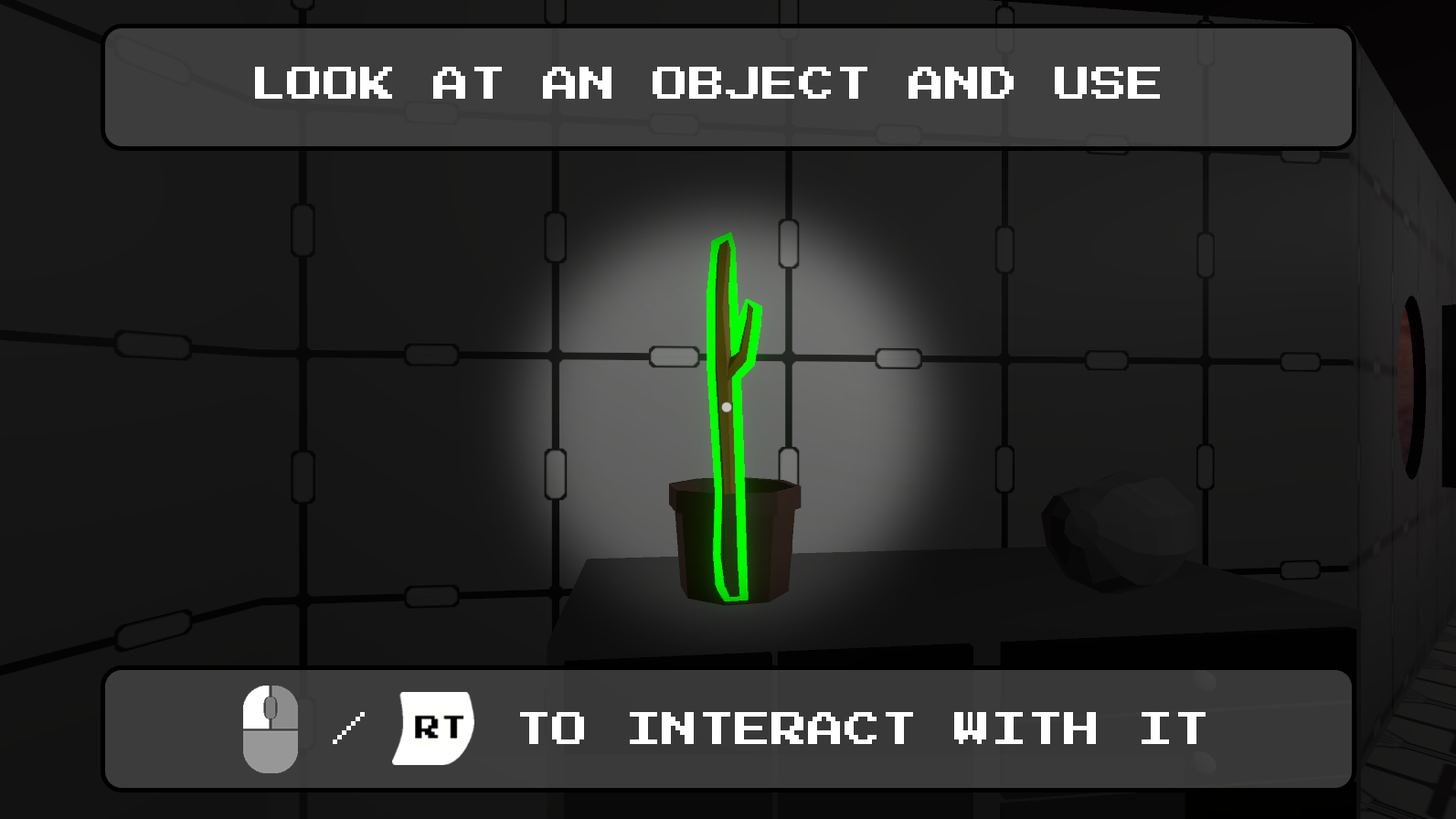
<style>
.page{position:relative;width:1456px;height:819px}
.page>*{position:absolute;margin:0}
.t1{font:36.6px "PressStart2P-Regular";color:#ffffff;text-transform:uppercase}
</style>
<div class="page">
<p class="t1" style="left:255px;top:67px;width:905px;height:32px">Look at an Object and use</p>
<p class="t1" style="left:333px;top:712px;width:873px;height:32px">/    to interact with it</p>
</div>
